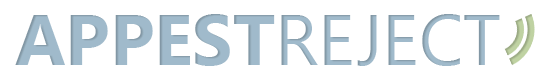
<style>
.page{position:relative;width:550px;height:80px;background:#ffffff}
.page>*{position:absolute;margin:0}
.t1{font:72px "NirmalaUI-Bold";color:#a0bacb}
.t2{font:72px "NirmalaUI";color:#a0bacb}
</style>
<div class="page">
<p class="t1" style="left:15px;top:14px;width:485px;height:52px">APPEST<span class="t2">REJECT</span></p>
</div>
